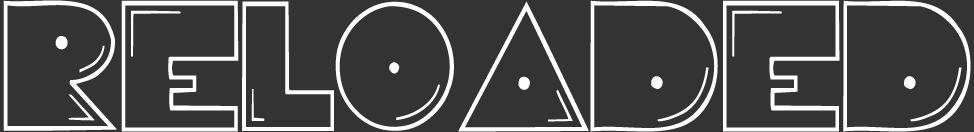
<style>
.page{position:relative;width:974px;height:132px;background:#333333}
.page>*{position:absolute;margin:0}
.t1{font:131.1px "PacFont";color:#ffffff;scale:0.92 1}
</style>
<div class="page">
<p class="t1" style="left:3px;top:0px;width:968px;height:132px">RELOADED</p>
</div>
